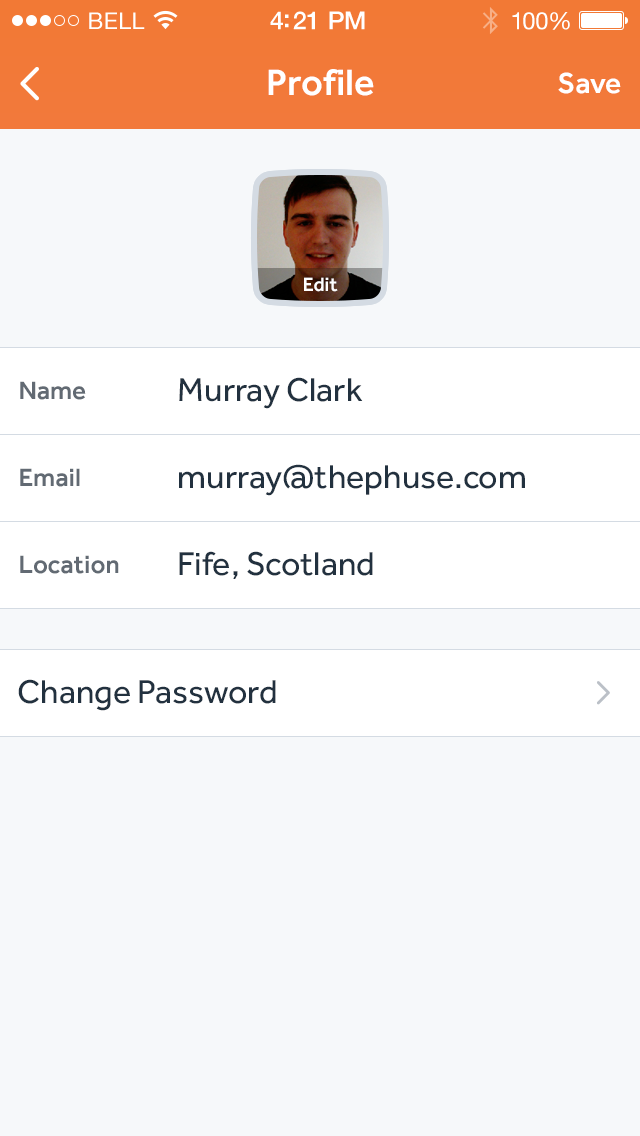
<style>
.page{position:relative;width:640px;height:1136px;background:#f6f8fa}
.page>*{position:absolute;margin:0}
.t1{font:23px "HelveticaNeue";letter-spacing:0.02em;color:#ffffff}
.t2{font:25px "HelveticaNeue-Medium";letter-spacing:-0.02em;color:#ffffff}
.t3{font:24px "HelveticaNeue";letter-spacing:-0.02em;color:#ffffff}
.t4{font:38px "Effra-Medium";color:#ffffff}
.t5{font:30px "Effra-Medium";color:#ffffff}
.t6{font:20px "Effra-Medium";color:#ffffff}
.t7{font:34px "Effra-Regular";color:#22313f}
.t8{font:26px "Effra-Medium";color:#626a73}
</style>
<div class="page">
<p class="t1" style="left:89px;top:12px;width:56px;height:17px">BELL</p>
<p class="t2" style="left:270px;top:11px;width:95px;height:19px">4:21 PM</p>
<p class="t3" style="left:512px;top:12px;width:58px;height:18px">100%</p>
<p class="t4" style="left:268px;top:69px;width:106px;height:27px">Profile</p>
<p class="t5" style="left:558px;top:72px;width:63px;height:22px">Save</p>
<p class="t6" style="left:304px;top:277px;width:34px;height:15px">Edit</p>
<p class="t7" style="left:179px;top:377px;width:184px;height:32px">Murray Clark</p>
<p class="t8" style="left:20px;top:381px;width:66px;height:19px">Name</p>
<p class="t8" style="left:20px;top:468px;width:60px;height:19px">Email</p>
<p class="t7" style="left:179px;top:464px;width:346px;height:32px">murray@thephuse.com</p>
<p class="t8" style="left:20px;top:555px;width:99px;height:19px">Location</p>
<p class="t7" style="left:179px;top:551px;width:194px;height:28px">Fife, Scotland</p>
<p class="t7" style="left:18px;top:679px;width:258px;height:32px">Change Password</p>
</div>
